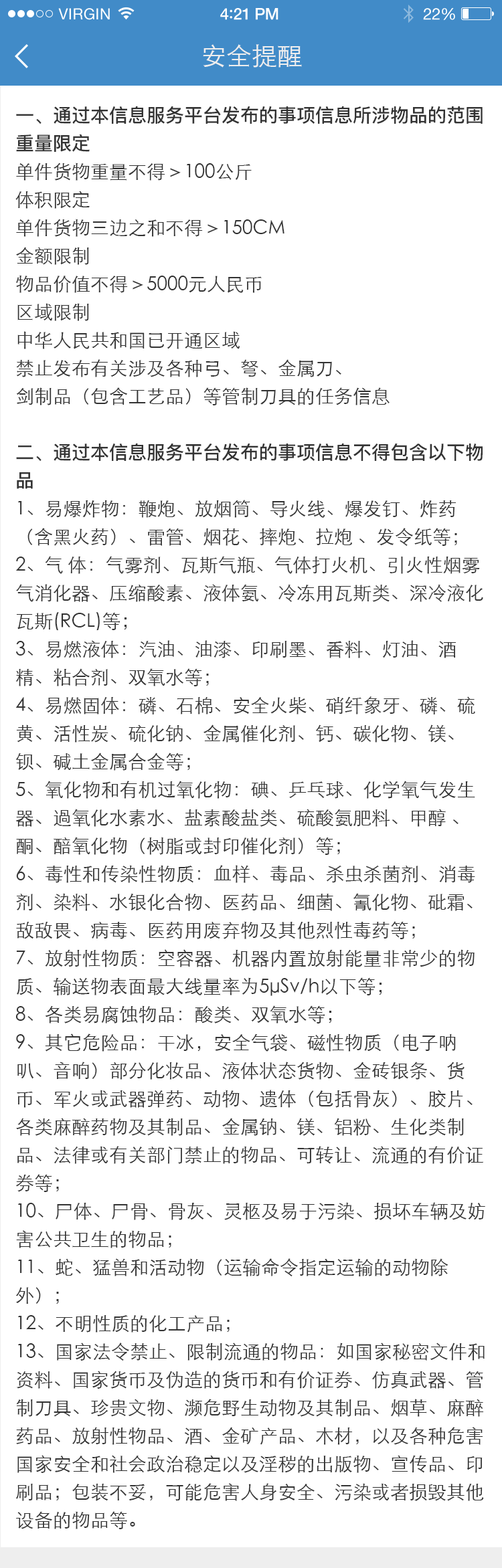
<style>
.page{position:relative;width:502px;height:1568px;background:#ffffff}
.page>*{position:absolute;margin:0}
.t1{font:15.4px "HelveticaNeue";letter-spacing:0.02em;color:#ffffff}
.t2{font:16.1px "HelveticaNeue-Medium";letter-spacing:-0.02em;color:#ffffff}
.t3{font:17.4px "Avenir-Medium";letter-spacing:-0.02em;color:#ffffff}
.t4{font:16.1px "HelveticaNeue";letter-spacing:-0.02em;color:#ffffff}
.t5{font:25.4px "STXihei";color:#eeeeee}
.t6{font:18.7px/28.1px "STXihei";color:#333333}
.t7{font:18.7px/28.1px "PingFang-SC-Bold";color:#333333}
</style>
<div class="page">
<p class="t1" style="left:58px;top:8px;width:52px;height:12px">VIRGIN</p>
<p class="t2" style="left:220px;top:8px;width:58px;height:12px">4<span class="t3">:</span>21 PM</p>
<p class="t4" style="left:423px;top:8px;width:32px;height:12px">22%</p>
<p class="t5" style="left:203px;top:44px;width:99px;height:24px">安全提醒</p>
<p class="t6" style="left:15px;top:106px;width:470px;height:1423px"><span class="t7">一、通过本信息服务平台发布的事项信息所涉物品的范围<br>重量限定<br></span>单件货物重量不得＞100公斤<br>体积限定<br>单件货物三边之和不得＞150CM<br>金额限制<br>物品价值不得＞5000元人民币<br>区域限制<br>中华人民共和国已开通区域<br>禁止发布有关涉及各种弓、弩、金属刀、<br>剑制品（包含工艺品）等管制刀具的任务信息<br> <br><span class="t7">二、通过本信息服务平台发布的事项信息不得包含以下物品<br></span>1、易爆炸物：鞭炮、放烟筒、导火线、爆发钉、炸药（含黑火药）、雷管、烟花、摔炮、拉炮 、发令纸等；<br>2、气 体：气雾剂、瓦斯气瓶、气体打火机、引火性烟雾气消化器、压缩酸素、液体氨、冷冻用瓦斯类、深冷液化瓦斯(RCL)等；<br>3、易燃液体：汽油、油漆、印刷墨、香料、灯油、酒精、粘合剂、双氧水等；<br>4、易燃固体：磷、石棉、安全火柴、硝纤象牙、磷、硫黄、活性炭、硫化钠、金属催化剂、钙、碳化物、镁、钡、碱土金属合金等；<br>5、氧化物和有机过氧化物：碘、乒乓球、化学氧气发生器、過氧化水素水、盐素酸盐类、硫酸氨肥料、甲醇 、酮、醅氧化物（树脂或封印催化剂）等；<br>6、毒性和传染性物质：血样、毒品、杀虫杀菌剂、消毒剂、染料、水银化合物、医药品、细菌、氰化物、砒霜、敌敌畏、病毒、医药用废弃物及其他烈性毒药等；<br>7、放射性物质：空容器、机器内置放射能量非常少的物质、输送物表面最大线量率为5μSv/h以下等；<br>8、各类易腐蚀物品：酸类、双氧水等；<br>9、其它危险品：干冰，安全气袋、磁性物质（电子呐叭、音响）部分化妆品、液体状态货物、金砖银条、货币、军火或武器弹药、动物、遗体（包括骨灰）、胶片、各类麻醉药物及其制品、金属钠、镁、铝粉、生化类制品、法律或有关部门禁止的物品、可转让、流通的有价证券等；<br>10、尸体、尸骨、骨灰、灵柩及易于污染、损坏车辆及妨害公共卫生的物品；<br>11、蛇、猛兽和活动物（运输命令指定运输的动物除外）；<br>12、不明性质的化工产品；<br>13、国家法令禁止、限制流通的物品：如国家秘密文件和资料、国家货币及伪造的货币和有价证券、仿真武器、管制刀具、珍贵文物、濒危野生动物及其制品、烟草、麻醉药品、放射性物品、酒、金矿产品、木材，以及各种危害国家安全和社会政治稳定以及淫秽的出版物、宣传品、印刷品；包装不妥，可能危害人身安全、污染或者损毁其他设备的物品等。</p>
</div>
